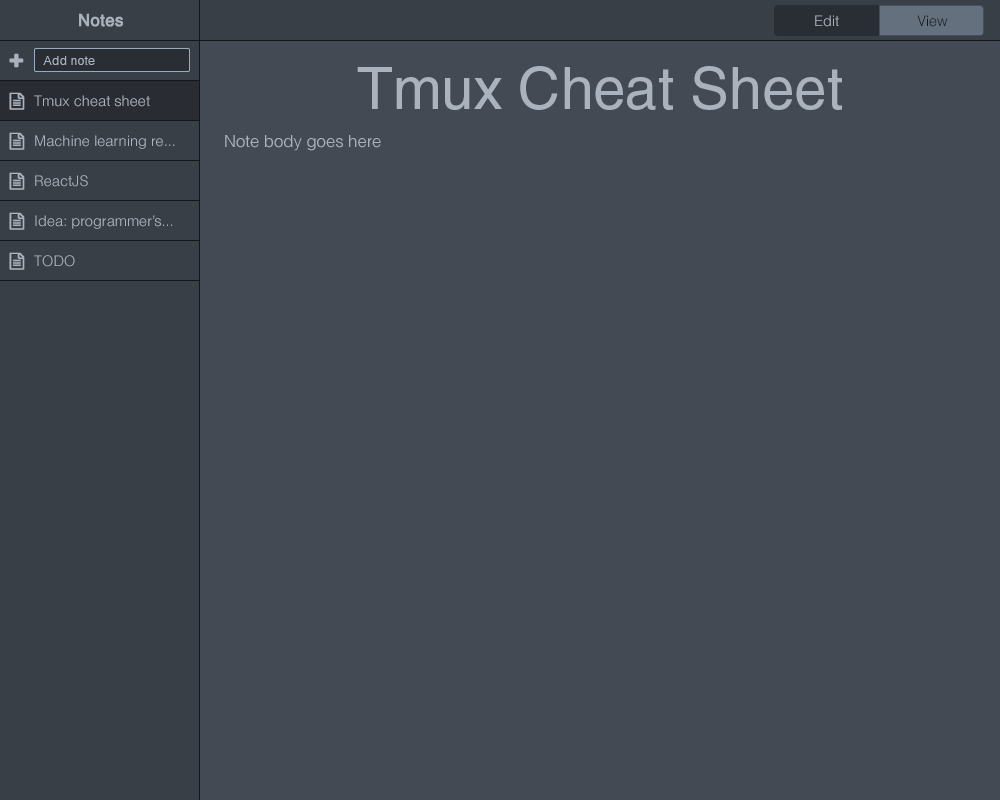
<style>
.page{position:relative;width:1000px;height:800px;background:#434a54}
.page>*{position:absolute;margin:0}
.t1{font:16.7px "Helvetica";color:#aab2bd;font-weight:bold}
.t2{font:14.6px "HelveticaLight";color:#aab2bd}
.t3{font:14.6px "HelveticaLight";color:#17181a}
.t4{font:12.5px "HelveticaLight";color:#aab2bd}
.t5{font:58.3px "Helvetica";color:#aab2bd}
.t6{font:16.7px "HelveticaLight";color:#aab2bd}
</style>
<div class="page">
<p class="t1" style="left:79px;top:13px;width:44px;height:14px">Notes</p>
<p class="t2" style="left:815px;top:15px;width:24px;height:12px">Edit</p>
<p class="t3" style="left:917px;top:15px;width:31px;height:12px">View</p>
<p class="t4" style="left:43px;top:56px;width:52px;height:9px">Add note</p>
<p class="t5" style="left:357px;top:66px;width:485px;height:44px">Tmux Cheat Sheet</p>
<p class="t2" style="left:34px;top:95px;width:116px;height:12px">Tmux cheat sheet</p>
<p class="t2" style="left:35px;top:135px;width:140px;height:14px">Machine learning re...</p>
<p class="t6" style="left:225px;top:135px;width:156px;height:16px">Note body goes here</p>
<p class="t2" style="left:35px;top:175px;width:53px;height:12px">ReactJS</p>
<p class="t2" style="left:35px;top:215px;width:137px;height:14px">Idea: programmer’s...</p>
<p class="t2" style="left:34px;top:255px;width:41px;height:12px">TODO</p>
</div>
